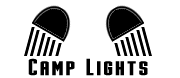
<style>
.page{position:relative;width:180px;height:78px;background:#ffffff}
.page>*{position:absolute;margin:0}
.t1{font:24px "Stark";letter-spacing:0.05em;color:#000000}
</style>
<div class="page">
<p class="t1" style="left:28px;top:58px;width:120px;height:18px">Camp Lights</p>
</div>
